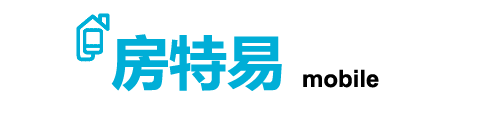
<style>
.page{position:relative;width:484px;height:124px;background:#ffffff}
.page>*{position:absolute;margin:0}
.t1{font:58px "MicrosoftYaHei-Bold";color:#00aed7}
.t2{font:24px "Arial-BoldMT";color:#000000}
</style>
<div class="page">
<p class="t1" style="left:111px;top:34px;width:171px;height:58px">房特易</p>
<p class="t2" style="left:303px;top:69px;width:76px;height:19px">mobile</p>
</div>
